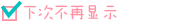
<style>
.page{position:relative;width:172px;height:21px;background:#ffffff}
.page>*{position:absolute;margin:0}
.t1{font:18px "¢è?";color:#ff93a5}
</style>
<div class="page">
<p class="t1" style="left:24px;top:5px;width:93px;height:15px">下次不再显示</p>
</div>
